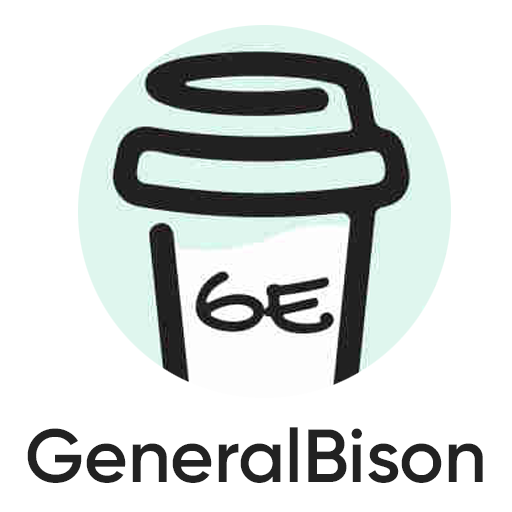
<style>
.page{position:relative;width:512px;height:512px;background:#ffffff}
.page>*{position:absolute;margin:0}
.t1{font:75px "Gilroy-SemiBold";color:#222222}
</style>
<div class="page">
<p class="t1" style="left:27px;top:427px;width:456px;height:56px">GeneralBison</p>
</div>
